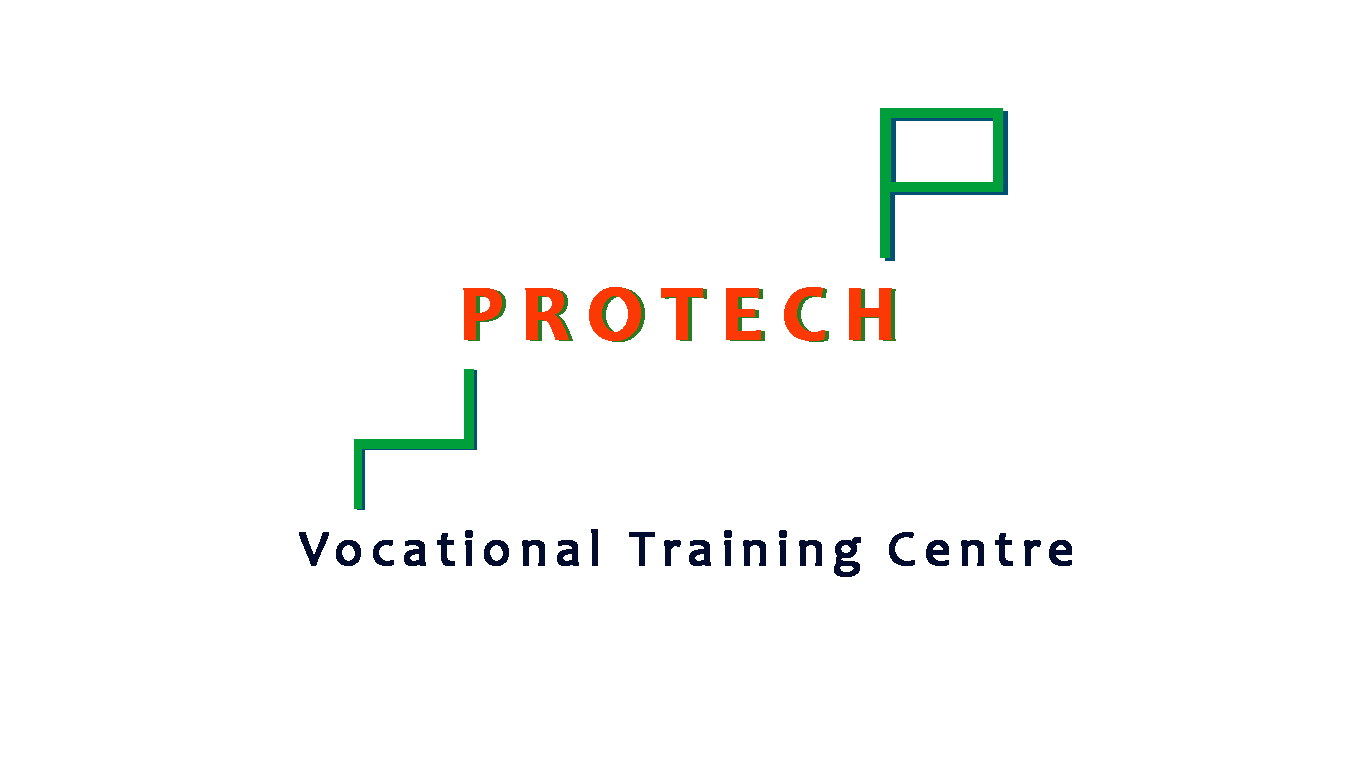
<style>
.page{position:relative;width:1366px;height:768px;background:#ffffff}
.page>*{position:absolute;margin:0}
.t1{font:80px "Candara-Bold";letter-spacing:0.2em;color:#fc3804;font-weight:bold}
.t2{font:50px "Candara";letter-spacing:0.15em;color:#010c2f;font-weight:bold}
</style>
<div class="page">
<p class="t1" style="left:463px;top:287px;width:429px;height:54px">PROTECH</p>
<p class="t1" style="left:467px;top:288px;width:429px;height:54px">PROTECH</p>
<p class="t2" style="left:299px;top:529px;width:773px;height:47px">Vocational Training Centre</p>
<p class="t2" style="left:299px;top:530px;width:773px;height:47px">Vocational Training Centre</p>
</div>
